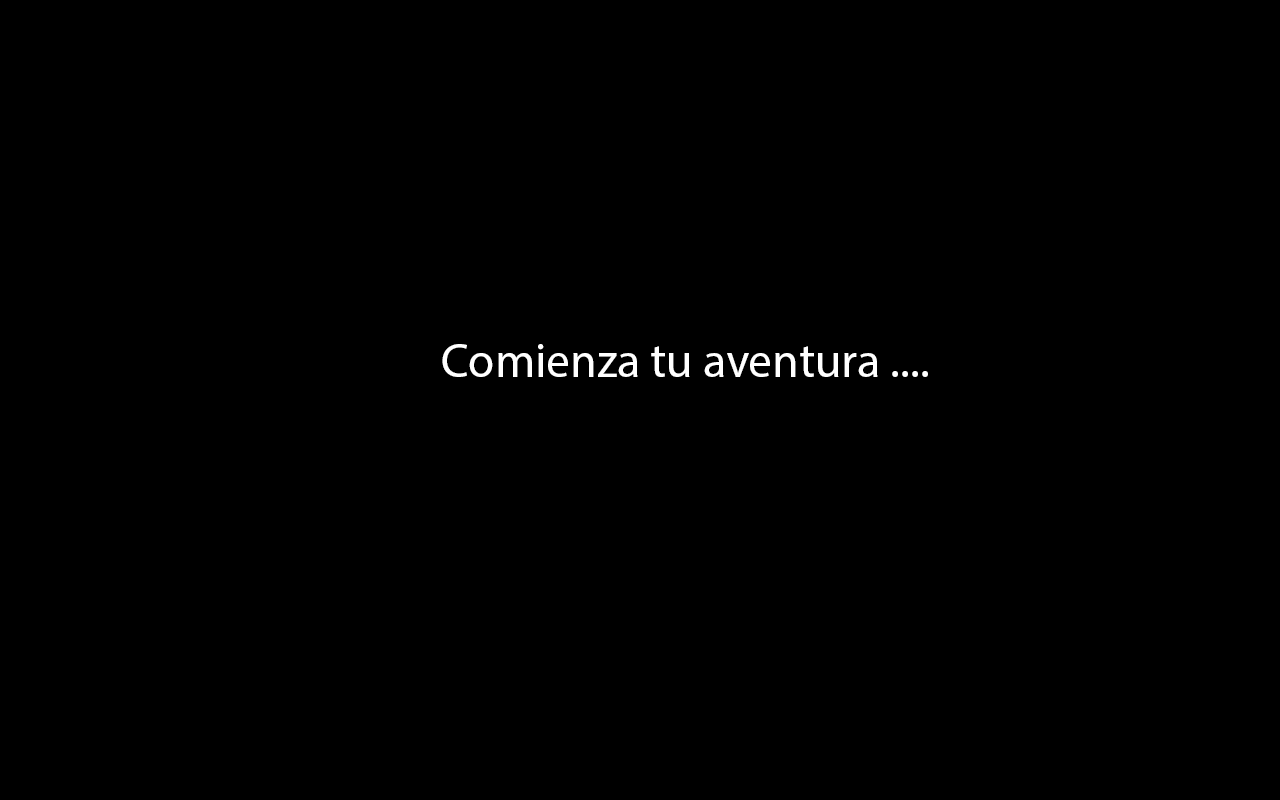
<style>
.page{position:relative;width:1280px;height:800px;background:#000000}
.page>*{position:absolute;margin:0}
.t1{font:48px "MyriadPro-Regular";color:#ffffff}
</style>
<div class="page">
<p class="t1" style="left:442px;top:344px;width:486px;height:33px">Comienza tu aventura ....</p>
</div>
